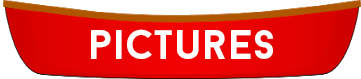
<style>
.page{position:relative;width:361px;height:79px}
.page>*{position:absolute;margin:0}
.t1{font:41.1px "BaronNeueBold";letter-spacing:0.02em;color:#fffefe}
</style>
<div class="page">
<p class="t1" style="left:91px;top:29px;width:182px;height:30px">pictures</p>
</div>
